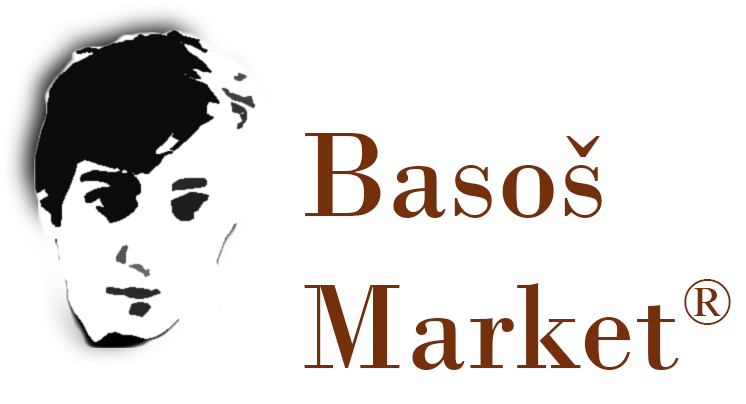
<style>
.page{position:relative;width:746px;height:404px;background:#ffffff}
.page>*{position:absolute;margin:0}
.t1{font:126.7px "BodoniMT";color:#73300b}
.t2{font:66.7px "BodoniMT";color:#73300b}
</style>
<div class="page">
<p class="t1" style="left:304px;top:133px;width:375px;height:237px">Basoš<br>Market</p>
<p class="t2" style="left:684px;top:279px;width:47px;height:46px">®</p>
</div>
